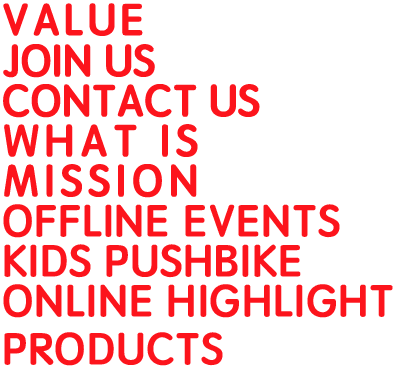
<style>
.page{position:relative;width:400px;height:368px;background:#ffffff}
.page>*{position:absolute;margin:0}
.t1{font:45px "STYuanti-SC-Bold";letter-spacing:0.08em;color:#fc141c;text-transform:uppercase}
.t2{font:45px "STYuanti-SC-Bold";color:#fc141c;text-transform:uppercase}
.t3{font:45px "STYuanti-SC-Bold";letter-spacing:0.12em;color:#fc141c;text-transform:uppercase}
.t4{font:45px "STYuanti-SC-Bold";letter-spacing:0.02em;color:#fc141c;text-transform:uppercase}
.t5{font:45px/48px "STYuanti-SC-Bold";letter-spacing:0.02em;color:#fc141c;text-transform:uppercase}
</style>
<div class="page">
<p class="t1" style="left:3px;top:3px;width:140px;height:33px">value</p>
<p class="t2" style="left:3px;top:44px;width:152px;height:34px">join us</p>
<p class="t2" style="left:3px;top:84px;width:257px;height:34px">contact us</p>
<p class="t3" style="left:4px;top:124px;width:194px;height:33px">what is</p>
<p class="t3" style="left:4px;top:164px;width:193px;height:34px">mission</p>
<p class="t4" style="left:3px;top:204px;width:337px;height:34px">Offline events</p>
<p class="t4" style="left:4px;top:244px;width:297px;height:34px">kids pushbike</p>
<p class="t5" style="left:3px;top:284px;width:390px;height:82px">Online Highlight <br>Products</p>
</div>
